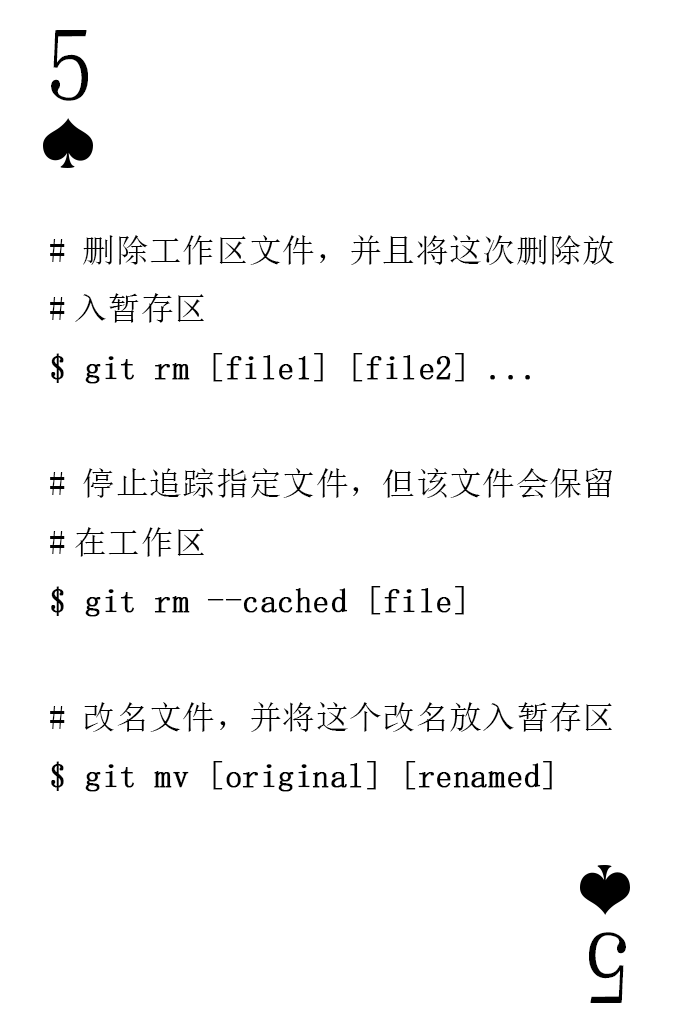
<style>
.page{position:relative;width:673px;height:1028px;background:#ffffff}
.page>*{position:absolute;margin:0}
.t1{font:104.2px "SimSun-ExtB";color:#010101;scale:0.93 1}
.t2{font:33.3px "SimSun";color:#000000;font-weight:bold}
.t3{font:33.3px "SimSun";color:#000000}
</style>
<div class="page">
<p class="t1" style="left:51px;top:30px;width:37px;height:71px">5</p>
<p class="t2" style="left:50px;top:235px;width:564px;height:557px"><span class="t3"># 删除工作区文件，并且将这次删除放<br>#入暂存区<br></span>$ git rm [file1] [file2] ...<br><span class="t3"><br># 停止追踪指定文件，但该文件会保留<br>#在工作区<br></span>$ git rm --cached [file]<br><span class="t3"><br># 改名文件，并将这个改名放入暂存区<br></span>$ git mv [original] [renamed]</p>
<p class="t1" style="left:589px;top:932px;width:37px;height:71px;rotate:180deg">5</p>
</div>
